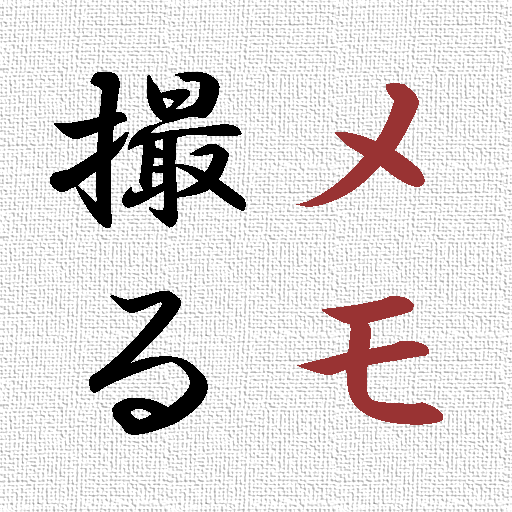
<style>
.page{position:relative;width:512px;height:512px;background:#ffffff}
.page>*{position:absolute;margin:0}
.t1{font:213.3px "HGGyoshotai";color:#000000}
.t2{font:213.3px "HGGyoshotai";color:#993333}
</style>
<div class="page">
<p class="t1" style="left:50px;top:72px;width:196px;height:363px;text-align:center">撮る</p>
<p class="t2" style="left:296px;top:83px;width:147px;height:342px">メモ</p>
</div>
